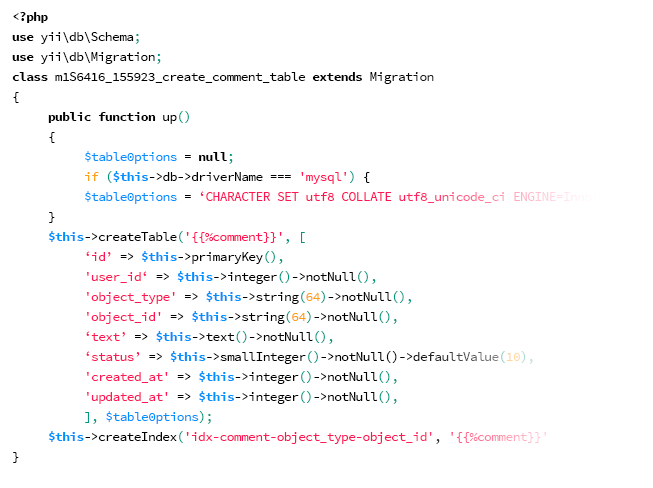
<style>
.page{position:relative;width:653px;height:488px;background:#ffffff}
.page>*{position:absolute;margin:0}
.t1{font:13px/20px "SourceCodePro-Regular";letter-spacing:-0.05em;color:#ff1654}
.t2{font:13px/20px "SourceCodePro-Bold";letter-spacing:-0.05em;color:#000000}
.t3{font:13px/20px "SourceCodePro-Regular";letter-spacing:-0.05em;color:#000000}
.t4{font:13px/20px "SourceCodePro-Regular";letter-spacing:-0.05em;color:#009980}
.t5{font:13px/20px "SourceCodePro-Regular";letter-spacing:-0.05em;color:#0090ff}
.t6{font:13px/20px "SourceCodePro-Regular";letter-spacing:-0.05em;color:#ff9f16}
.t7{font:13px/20px "SourceCodePro-Bold";letter-spacing:-0.05em;color:#0090ff}
</style>
<div class="page">
<p class="t1" style="left:12px;top:12px;width:587px;height:451px"><span class="t2">&lt;?php<br>use</span><span class="t3"> yii\db\Schema</span><span class="t4">;<br></span><span class="t2">use</span><span class="t3"> yii\db\Migration</span><span class="t4">;<br></span><span class="t2">class</span><span class="t3"> m1S6416_155923_create_comment_table </span><span class="t2">extends</span><span class="t3"> Migration<br>{<br> </span><span class="t2">public function</span><span class="t3"> up</span><span class="t4">()<br></span><span class="t3"> {<br>  </span><span class="t5">$table0ptions</span><span class="t3"> = </span><span class="t2">null</span><span class="t4">;<br>  </span><span class="t6">if </span><span class="t4">(</span><span class="t7">$this</span><span class="t3">-&gt;db-&gt;driverName === </span>'mysql'<span class="t4">)</span><span class="t3"> {<br>  </span><span class="t5">$table0ptions</span><span class="t3"> = </span>‘CHARACTER SET utf8 COLLATE utf8_unicode_ci ENGINE=Innol<br><span class="t3"> }<br> </span><span class="t7">$this</span><span class="t3">-&gt;createTable</span><span class="t4">(</span>'{{%comment}}'<span class="t4">, [<br>  </span>‘id’<span class="t3"> =&gt; </span><span class="t7">$this</span><span class="t3">-&gt;primaryKey</span><span class="t4">(),<br>  </span>'user_id‘<span class="t3"> =&gt; </span><span class="t7">$this</span><span class="t3">-&gt;integer</span><span class="t4">()</span><span class="t3">-&gt;notNull</span><span class="t4">(),<br>  </span>'object_type'<span class="t3"> =&gt; </span><span class="t7">$this</span><span class="t3">-&gt;string</span><span class="t4">(</span><span class="t6">64</span><span class="t4">)</span><span class="t3">-&gt;notNull</span><span class="t4">(),<br>  </span>'object_id'<span class="t3"> =&gt; </span><span class="t7">$this</span><span class="t3">-&gt;string</span><span class="t4">(</span><span class="t6">64</span><span class="t4">)</span><span class="t3">-&gt;notNull</span><span class="t4">(),<br>  </span>‘text’<span class="t3"> =&gt; </span><span class="t7">$this</span><span class="t3">-&gt;text</span><span class="t4">()</span><span class="t3">-&gt;notNull</span><span class="t4">(),<br>  </span>‘status’<span class="t3"> =&gt; </span><span class="t7">$this</span><span class="t3">-&gt;smallInteger</span><span class="t4">()</span><span class="t3">-&gt;notNull()-&gt;defaultValue</span><span class="t4">(</span><span class="t6">10</span><span class="t4">),<br>  </span>'created_at'<span class="t3"> =&gt; </span><span class="t7">$this</span><span class="t3">-&gt;integer</span><span class="t4">()</span><span class="t3">-&gt;notNull</span><span class="t4">(),<br>  </span>'updated_at'<span class="t3"> =&gt; </span><span class="t7">$this</span><span class="t3">-&gt;integer</span><span class="t4">()</span><span class="t3">-&gt;notNull</span><span class="t4">(),<br>  ], </span><span class="t5">$table0ptions</span><span class="t4">);<br> </span><span class="t7">$this</span><span class="t3">-&gt;createIndex</span><span class="t4">(</span>'idx-comment-object_type-object_id'<span class="t3">, </span>'{{%comment}}'<br><span class="t3">}</span></p>
</div>
